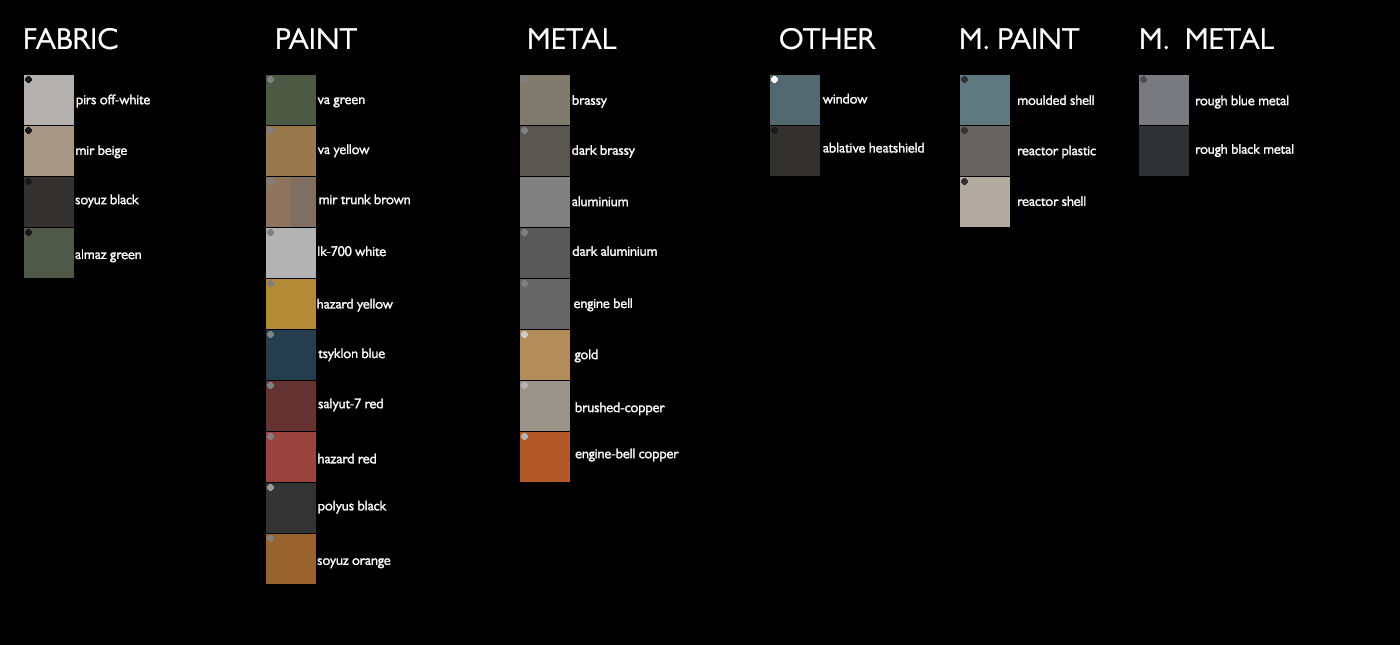
<style>
.page{position:relative;width:1400px;height:645px;background:#000000}
.page>*{position:absolute;margin:0}
.t1{font:30px "GillSans";color:#ffffff}
.t2{font:14px "GillSans";color:#ffffff}
</style>
<div class="page">
<p class="t1" style="left:25px;top:28px;width:1249px;height:22px">FABRIC     PAINT     METAL     OTHER   M. PAINT  M.  METAL</p>
<p class="t2" style="left:76px;top:94px;width:74px;height:14px">pirs off-white</p>
<p class="t2" style="left:317px;top:97px;width:48px;height:11px">va green</p>
<p class="t2" style="left:572px;top:95px;width:35px;height:13px">brassy</p>
<p class="t2" style="left:822px;top:93px;width:46px;height:11px">window</p>
<p class="t2" style="left:1018px;top:95px;width:76px;height:10px">moulded shell</p>
<p class="t2" style="left:1196px;top:95px;width:93px;height:14px">rough blue metal</p>
<p class="t2" style="left:76px;top:145px;width:51px;height:14px">mir beige</p>
<p class="t2" style="left:317px;top:144px;width:53px;height:14px">va yellow</p>
<p class="t2" style="left:572px;top:145px;width:63px;height:13px">dark brassy</p>
<p class="t2" style="left:823px;top:142px;width:101px;height:11px">ablative heatshield</p>
<p class="t2" style="left:1018px;top:145px;width:78px;height:14px">reactor plastic</p>
<p class="t2" style="left:1196px;top:144px;width:98px;height:13px">rough black metal</p>
<p class="t2" style="left:75px;top:194px;width:64px;height:14px">soyuz black</p>
<p class="t2" style="left:319px;top:194px;width:91px;height:11px">mir trunk brown</p>
<p class="t2" style="left:572px;top:196px;width:56px;height:11px">aluminium</p>
<p class="t2" style="left:1018px;top:196px;width:68px;height:10px">reactor shell</p>
<p class="t2" style="left:318px;top:246px;width:68px;height:11px">lk-700 white</p>
<p class="t2" style="left:572px;top:246px;width:85px;height:10px">dark aluminium</p>
<p class="t2" style="left:75px;top:249px;width:66px;height:14px">almaz green</p>
<p class="t2" style="left:317px;top:298px;width:76px;height:14px">hazard yellow</p>
<p class="t2" style="left:574px;top:298px;width:58px;height:14px">engine bell</p>
<p class="t2" style="left:318px;top:348px;width:67px;height:14px">tsyklon blue</p>
<p class="t2" style="left:574px;top:349px;width:24px;height:14px">gold</p>
<p class="t2" style="left:318px;top:398px;width:65px;height:14px">salyut-7 red</p>
<p class="t2" style="left:575px;top:402px;width:90px;height:14px">brushed-copper</p>
<p class="t2" style="left:575px;top:448px;width:104px;height:14px">engine-bell copper</p>
<p class="t2" style="left:318px;top:453px;width:58px;height:11px">hazard red</p>
<p class="t2" style="left:318px;top:500px;width:69px;height:14px">polyus black</p>
<p class="t2" style="left:317px;top:558px;width:74px;height:11px">soyuz orange</p>
</div>
